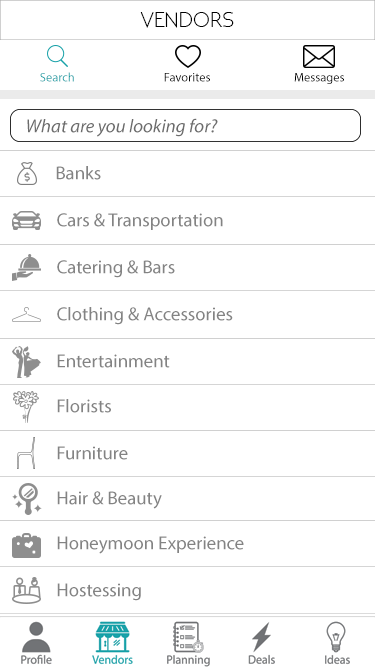
<style>
.page{position:relative;width:375px;height:667px;background:#ffffff}
.page>*{position:absolute;margin:0}
.t1{font:21.9px "NEOTERIC";color:#000000}
.t2{font:12.5px "MyriadPro-Regular";color:#18a1a8}
.t3{font:12.5px "MyriadPro-Regular";color:#000000}
.t4{font:18.8px "MyriadPro-It";color:#6c6c6c}
.t5{font:18.8px "MyriadPro-Regular";color:#838383}
</style>
<div class="page">
<p class="t1" style="left:140px;top:12px;width:94px;height:16px">VENDORS</p>
<p class="t2" style="left:40px;top:72px;width:34px;height:10px">Search</p>
<p class="t3" style="left:164px;top:73px;width:46px;height:9px">Favorites</p>
<p class="t3" style="left:294px;top:73px;width:50px;height:11px">Messages</p>
<p class="t4" style="left:27px;top:118px;width:191px;height:19px">What are you looking for?</p>
<p class="t5" style="left:56px;top:166px;width:45px;height:14px">Banks</p>
<p class="t5" style="left:57px;top:213px;width:166px;height:17px">Cars &amp; Transportation</p>
<p class="t5" style="left:57px;top:260px;width:118px;height:18px">Catering &amp; Bars</p>
<p class="t5" style="left:57px;top:307px;width:176px;height:18px">Clothing &amp; Accessories</p>
<p class="t5" style="left:57px;top:354px;width:113px;height:14px">Entertainment</p>
<p class="t5" style="left:57px;top:399px;width:54px;height:14px">Florists</p>
<p class="t5" style="left:57px;top:446px;width:71px;height:14px">Furniture</p>
<p class="t5" style="left:57px;top:491px;width:105px;height:18px">Hair &amp; Beauty</p>
<p class="t5" style="left:57px;top:536px;width:187px;height:18px">Honeymoon Experience</p>
<p class="t5" style="left:57px;top:583px;width:84px;height:18px">Hostessing</p>
</div>
